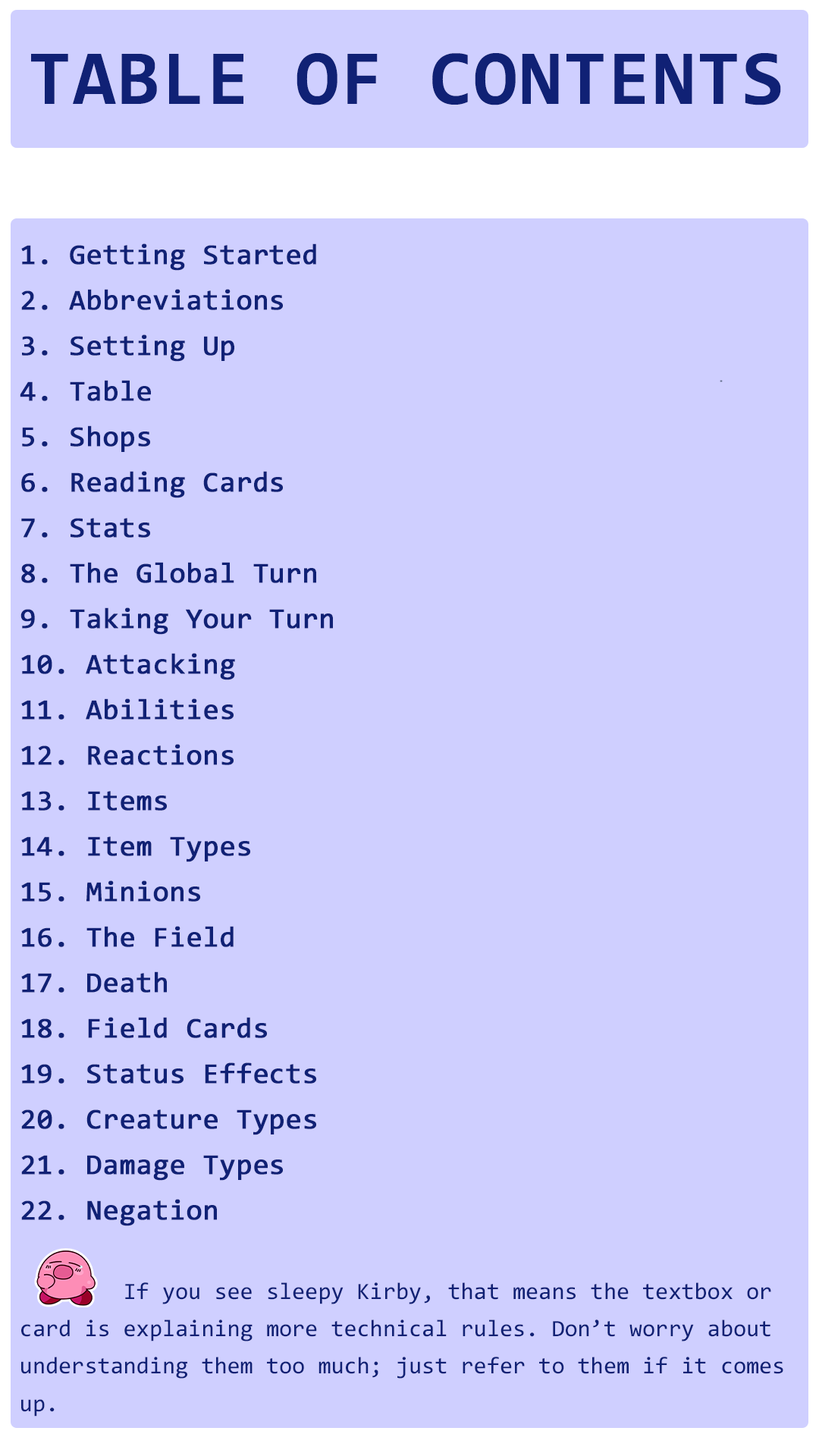
<style>
.page{position:relative;width:819px;height:1456px;background:#cfcfff}
.page>*{position:absolute;margin:0}
.t1{font:78.3px "Consolas-Bold";letter-spacing:0.02em;color:#102175}
.t2{font:28.8px/45.5px "Consolas";color:#102175;font-weight:bold}
.t3{font:23.6px/37.3px "Consolas";color:#102175}
</style>
<div class="page">
<p class="t1" style="left:31px;top:53px;width:750px;height:52px">TABLE OF CONTENTS</p>
<p class="t2" style="left:20px;top:243px;width:313px;height:983px">1. Getting Started<br>2. Abbreviations<br>3. Setting Up<br>4. Table<br>5. Shops<br>6. Reading Cards<br>7. Stats<br>8. The Global Turn<br>9. Taking Your Turn<br>10. Attacking<br>11. Abilities<br>12. Reactions<br>13. Items<br>14. Item Types<br>15. Minions<br>16. The Field<br>17. Death<br>18. Field Cards<br>19. Status Effects<br>20. Creature Types<br>21. Damage Types<br>22. Negation</p>
<p class="t3" style="left:21px;top:1282px;width:762px;height:135px">If you see sleepy Kirby, that means the textbox or card is explaining more technical rules. Don’t worry about understanding them too much; just refer to them if it comes up.</p>
</div>
